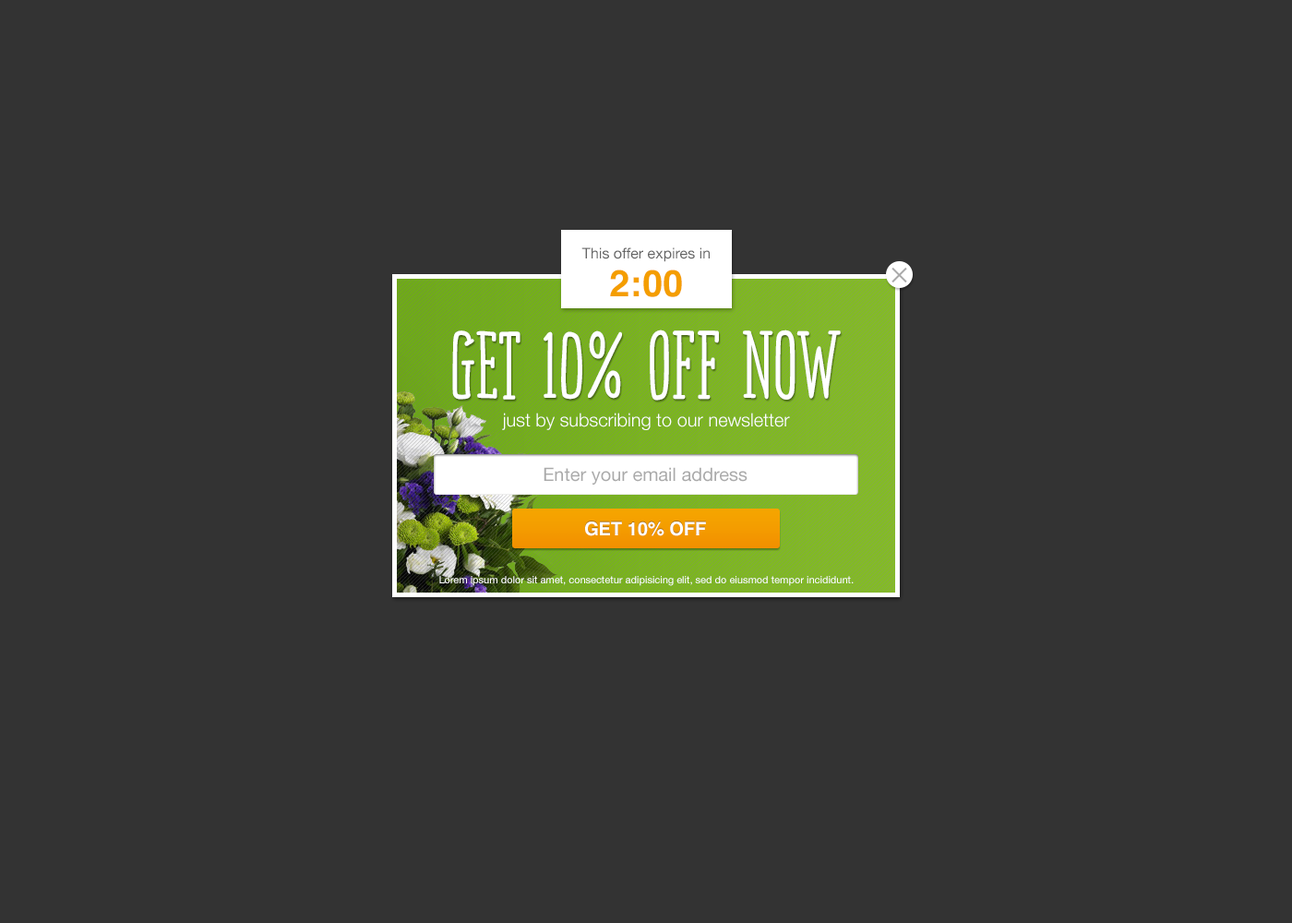
<style>
.page{position:relative;width:1292px;height:923px;background:#333333}
.page>*{position:absolute;margin:0}
.t1{font:14.8px "HelveticaNeue";color:#666666}
.t2{font:36.9px "Helvetica-Bold";color:#f49e00}
.t3{font:87.7px "SoundtrackBold";color:#ffffff}
.t4{font:18.5px "HelveticaNeue-Light";color:#ffffff}
.t5{font:18.5px "HelveticaNeue";color:#aaaaaa}
.t6{font:18.5px "Helvetica-Bold";color:#ffffff}
.t7{font:10.2px "HelveticaNeue";color:#ffffff}
</style>
<div class="page">
<p class="t1" style="left:581px;top:247px;width:129px;height:15px">This offer expires in</p>
<p class="t2" style="left:610px;top:269px;width:72px;height:28px">2:00</p>
<p class="t3" style="left:452px;top:329px;width:389px;height:72px">Get 10% Off now</p>
<p class="t4" style="left:502px;top:413px;width:288px;height:17px">just by subscribing to our newsletter</p>
<p class="t5" style="left:544px;top:467px;width:204px;height:18px">Enter your email address</p>
<p class="t6" style="left:585px;top:521px;width:121px;height:15px">GET 10% OFF</p>
<p class="t7" style="left:439px;top:576px;width:415px;height:10px">Lorem ipsum dolor sit amet, consectetur adipisicing elit, sed do eiusmod tempor incididunt.</p>
</div>
